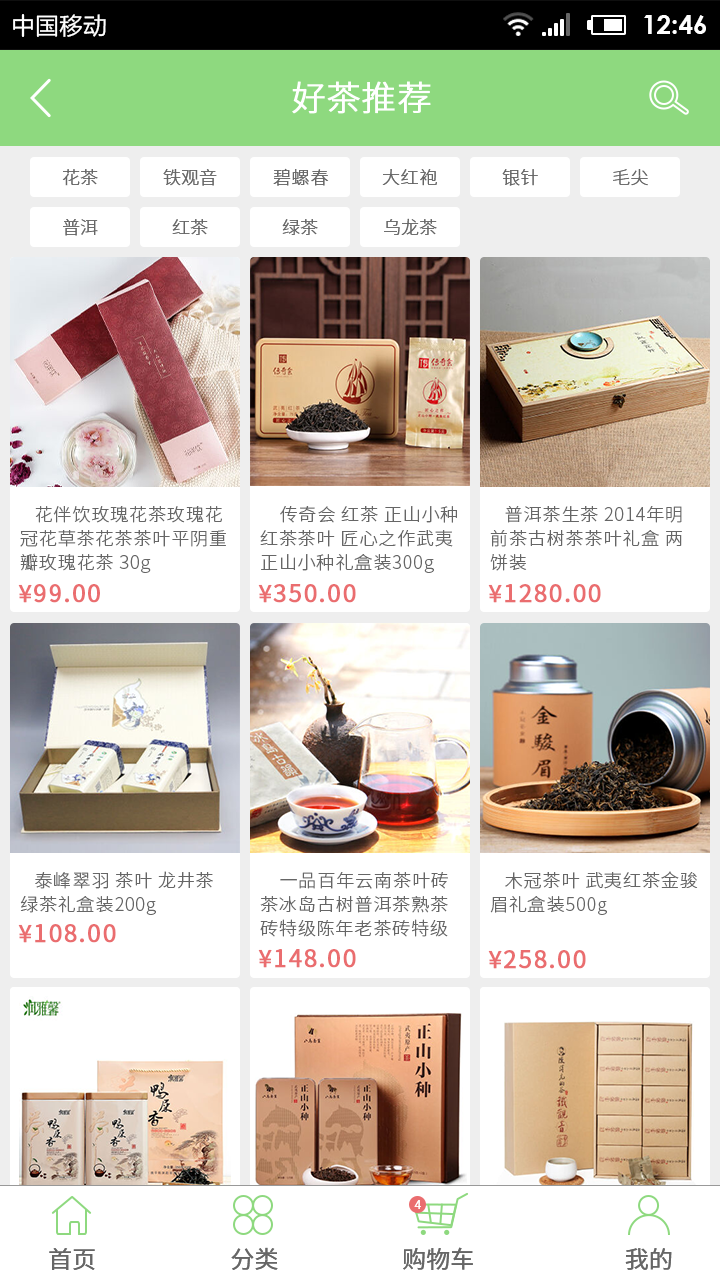
<style>
.page{position:relative;width:720px;height:1280px;background:#ffffff}
.page>*{position:absolute;margin:0}
.t1{font:34px "NotoSansHans-Light";color:#ffffff;font-weight:bold}
.t2{font:18px "NotoSansHans-Light";color:#666666;text-transform:uppercase}
.t3{font:18px "NotoSansHans-Light";letter-spacing:0.05em;color:#666666}
.t4{font:18px/24px "NotoSansHans-Light";letter-spacing:0.05em;color:#666666}
.t5{font:24px "NotoSansHans-Regular";letter-spacing:0.05em;color:#ea6d6f;font-weight:bold}
.t6{font:12px "NotoSansHans-Regular";color:#ffffff;text-transform:uppercase}
.t7{font:24px "NotoSansHans-Regular";color:#666666;text-transform:uppercase}
</style>
<div class="page">
<p class="t1" style="left:292px;top:81px;width:139px;height:33px">好茶推荐</p>
<p class="t2" style="left:62px;top:169px;width:36px;height:17px">花茶</p>
<p class="t2" style="left:163px;top:169px;width:54px;height:17px">铁观音</p>
<p class="t3" style="left:273px;top:168px;width:56px;height:18px">碧螺春</p>
<p class="t3" style="left:382px;top:169px;width:55px;height:17px">大红袍</p>
<p class="t3" style="left:502px;top:169px;width:36px;height:17px">银针</p>
<p class="t3" style="left:613px;top:169px;width:35px;height:17px">毛尖</p>
<p class="t2" style="left:63px;top:219px;width:35px;height:17px">普洱</p>
<p class="t2" style="left:172px;top:219px;width:36px;height:16px">红茶</p>
<p class="t2" style="left:282px;top:219px;width:36px;height:16px">绿茶</p>
<p class="t2" style="left:384px;top:218px;width:53px;height:17px">乌龙茶</p>
<p class="t4" style="left:20px;top:506px;width:206px;height:67px">花伴饮玫瑰花茶玫瑰花冠花草茶花茶茶叶平阴重瓣玫瑰花茶 30g</p>
<p class="t4" style="left:260px;top:506px;width:197px;height:67px">传奇会 红茶 正山小种红茶茶叶 匠心之作武夷正山小种礼盒装300g</p>
<p class="t4" style="left:490px;top:506px;width:192px;height:65px">普洱茶生茶 2014年明前茶古树茶茶叶礼盒 两饼装</p>
<p class="t5" style="left:18px;top:584px;width:82px;height:19px">¥99.00</p>
<p class="t5" style="left:258px;top:584px;width:98px;height:19px">¥350.00</p>
<p class="t5" style="left:488px;top:584px;width:113px;height:19px">¥1280.00</p>
<p class="t4" style="left:20px;top:871px;width:193px;height:44px">泰峰翠羽 茶叶 龙井茶 绿茶礼盒装200g</p>
<p class="t4" style="left:260px;top:872px;width:188px;height:65px">一品百年云南茶叶砖茶冰岛古树普洱茶熟茶砖特级陈年老茶砖特级</p>
<p class="t4" style="left:490px;top:871px;width:208px;height:44px">木冠茶叶 武夷红茶金骏眉礼盒装500g</p>
<p class="t5" style="left:18px;top:924px;width:98px;height:19px">¥108.00</p>
<p class="t5" style="left:258px;top:949px;width:98px;height:19px">¥148.00</p>
<p class="t5" style="left:488px;top:950px;width:98px;height:19px">¥258.00</p>
<p class="t6" style="left:414px;top:1200px;width:7px;height:9px">4</p>
<p class="t7" style="left:49px;top:1247px;width:623px;height:23px">首页                         分类                       购物车                            我的</p>
</div>
